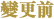
<style>
.page{position:relative;width:54px;height:19px;background:#ffffff}
.page>*{position:absolute;margin:0}
.t1{font:18px "RyuminPr6N-ExBold";letter-spacing:-0.025em;color:#b09541;font-weight:bold}
</style>
<div class="page">
<p class="t1" style="left:0px;top:0px;width:54px;height:18px">變更前</p>
</div>
